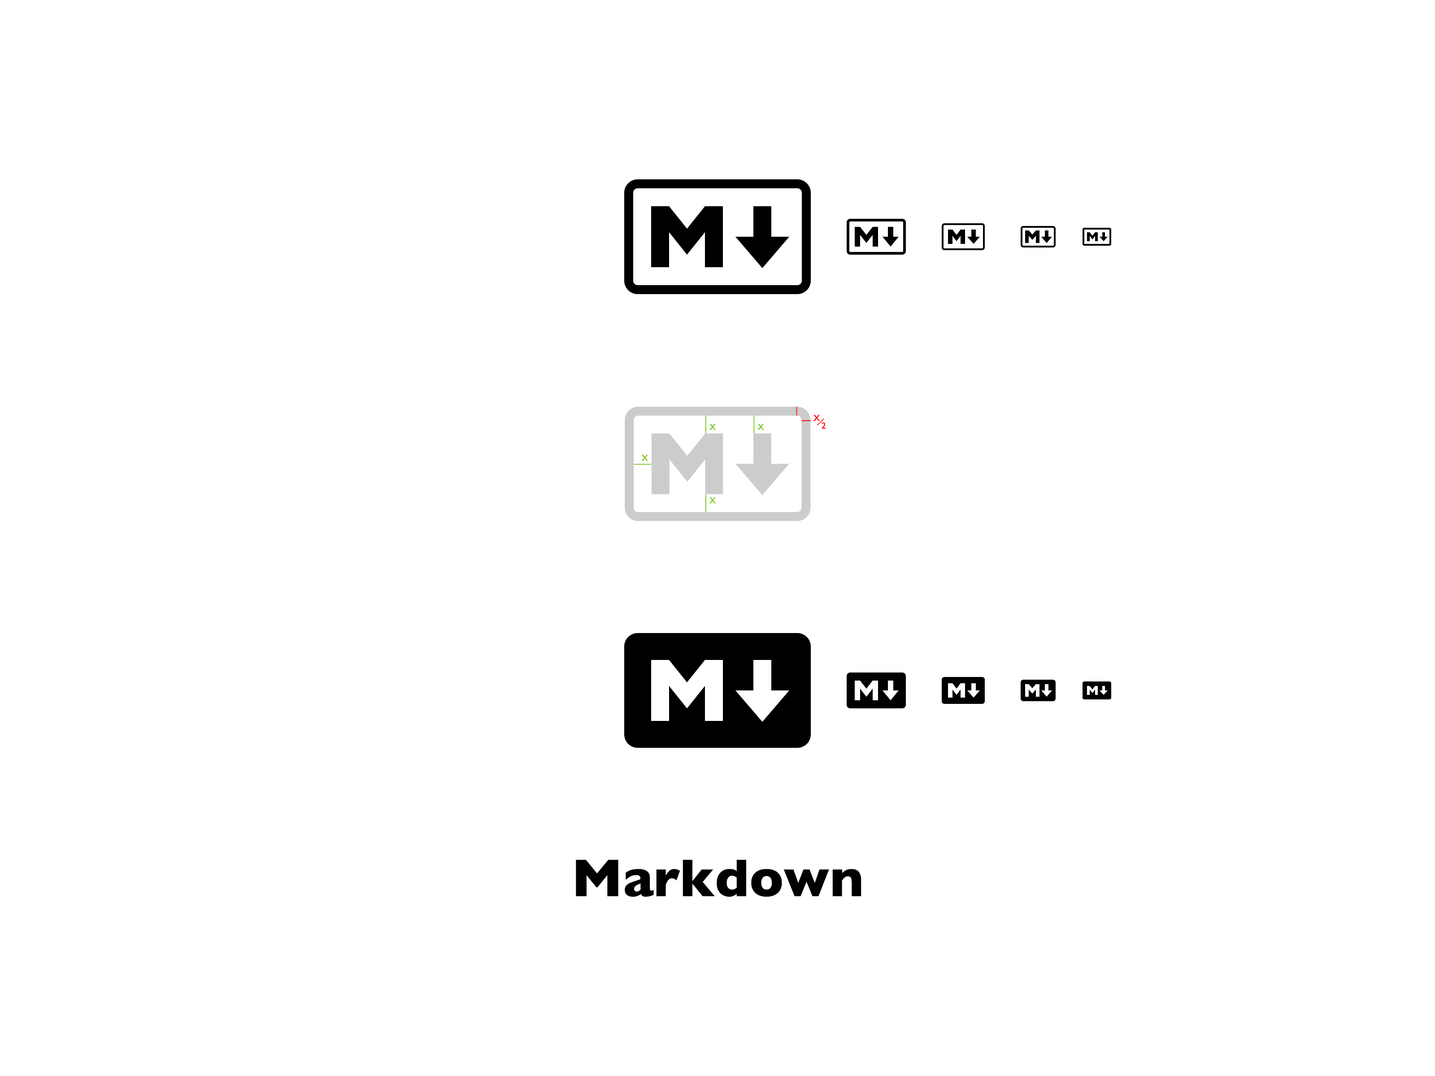
<style>
.page{position:relative;width:1435px;height:1076px;background:#ffffff}
.page>*{position:absolute;margin:0}
.t1{font:9px "GillSans-SemiBold";color:#84c82c}
.t2{font:9px "GillSans-SemiBold";color:#ff0000}
.t3{font:53.8px "GillSans-Bold";color:#000000}
</style>
<div class="page">
<p class="t1" style="left:709px;top:424px;width:7px;height:6px">X</p>
<p class="t1" style="left:757px;top:424px;width:7px;height:6px">X</p>
<p class="t2" style="left:813px;top:415px;width:7px;height:6px">X</p>
<p class="t2" style="left:821px;top:422px;width:4px;height:7px">2</p>
<p class="t1" style="left:641px;top:455px;width:7px;height:6px">X</p>
<p class="t1" style="left:709px;top:497px;width:7px;height:7px">X</p>
<p class="t3" style="left:576px;top:859px;width:285px;height:38px">Markdown</p>
</div>
